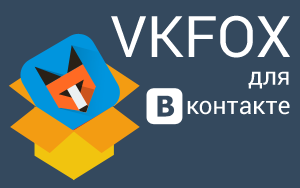
<style>
.page{position:relative;width:300px;height:188px;background:#34495e}
.page>*{position:absolute;margin:0}
.t1{font:57.3px "Roboto-Regular";color:#ffffff}
.t2{font:24.6px "Roboto-Regular";color:#ffffff}
</style>
<div class="page">
<p class="t1" style="left:111px;top:15px;width:179px;height:43px">VKFOX</p>
<p class="t2" style="left:187px;top:71px;width:103px;height:44px;text-align:right">для<br>контакте</p>
</div>
